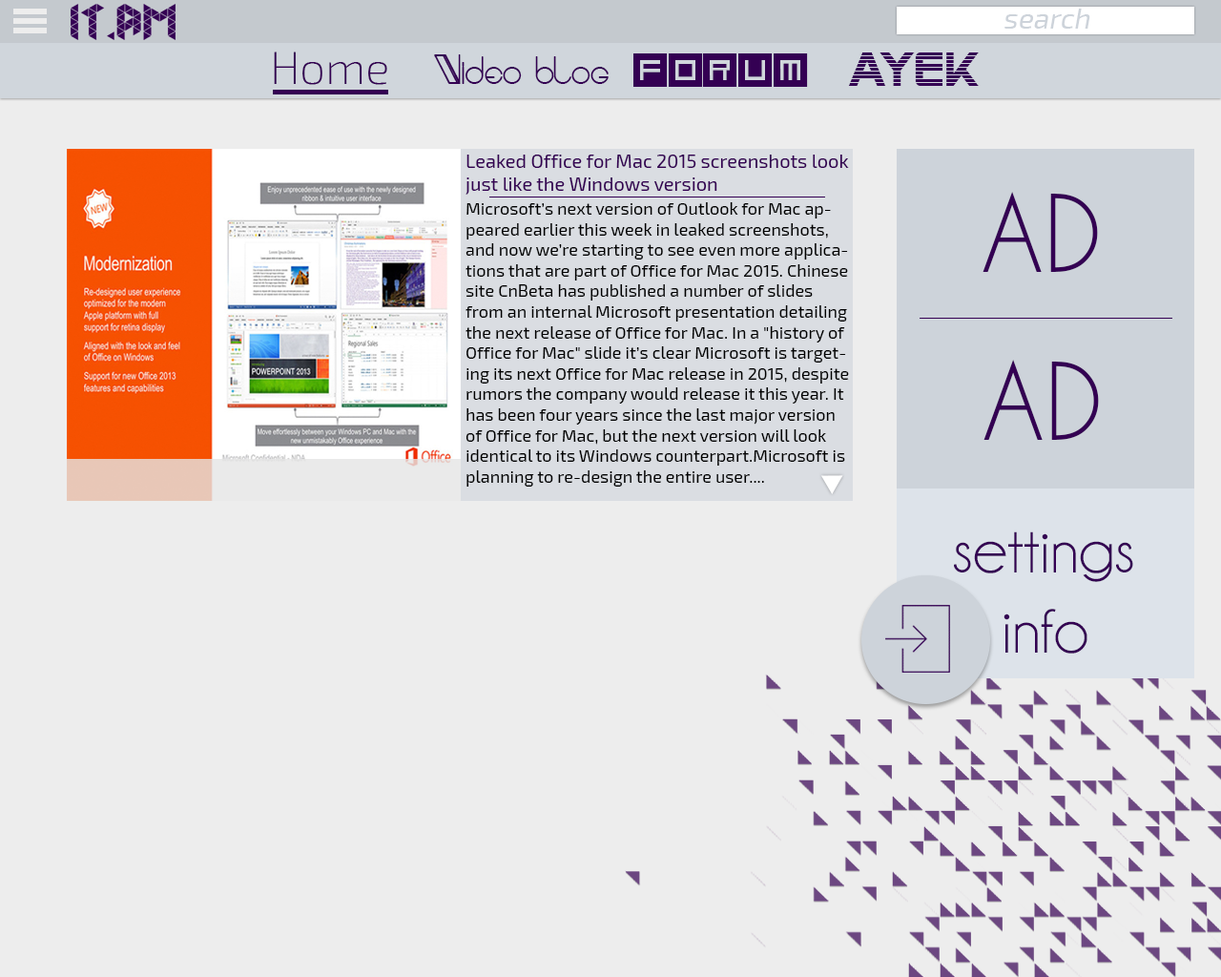
<style>
.page{position:relative;width:1221px;height:977px;background:#ededed}
.page>*{position:absolute;margin:0}
.t1{font:28.6px "Exo2-Regular";color:#cdd3da;font-style:italic}
.t2{font:22.9px "Exo2-ExtraLight";color:#cdd3da}
.t3{font:44.8px "Exo2-ExtraLight";color:#340053}
.t4{font:50.6px "Qubix";color:#340053}
.t5{font:47.7px "SFAlienEncounters";color:#340053}
.t6{font:56.3px "AracmeWaroundLight";color:#340053}
.t7{font:19.1px "Exo2-Regular";color:#340053}
.t8{font:100.2px "CaviarDreams";color:#340053}
.t9{font:100.2px "MyriadPro-Regular";color:#340053}
.t10{font:17.2px "Exo2-Regular";color:#000000}
.t11{font:100.2px "MyriadPro-Regular";color:#000000}
.t12{font:66.8px "Champagne&Limousines";color:#340053}
</style>
<div class="page">
<p class="t1" style="left:1003px;top:9px;width:87px;height:20px"><span class="t2">                     </span>search</p>
<p class="t3" style="left:274px;top:52px;width:113px;height:33px">Home</p>
<p class="t4" style="left:633px;top:53px;width:175px;height:34px">Forum</p>
<p class="t5" style="left:848px;top:52px;width:131px;height:34px">ayek</p>
<p class="t6" style="left:434px;top:54px;width:175px;height:30px">Video blog</p>
<p class="t7" style="left:465px;top:155px;width:384px;height:40px">Leaked Office for Mac 2015 screenshots look just like the Windows version</p>
<p class="t8" style="left:982px;top:192px;width:116px;height:80px"><span class="t9">  </span>AD</p>
<p class="t10" style="left:465px;top:202px;width:384px;height:284px">Microsoft’s next version of Outlook for Mac appeared earlier this week in leaked screenshots, and now we’re starting to see even more applications that are part of Office for Mac 2015. Chinese site CnBeta has published a number of slides from an internal Microsoft presentation detailing the next release of Office for Mac. In a "history of Office for Mac" slide it’s clear Microsoft is targeting its next Office for Mac release in 2015, despite rumors the company would release it this year. It has been four years since the last major version of Office for Mac, but the next version will look identical to its Windows counterpart.Microsoft is planning to re-design the entire user....</p>
<p class="t8" style="left:983px;top:360px;width:116px;height:80px"><span class="t11">  </span>AD</p>
<p class="t12" style="left:954px;top:531px;width:179px;height:122px">settings<br>    info</p>
</div>
